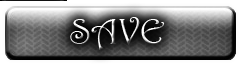
<style>
.page{position:relative;width:242px;height:67px}
.page>*{position:absolute;margin:0}
.t1{font:36px "Harrington"}
</style>
<div class="page">
<p class="t1" style="left:70px;top:17px;width:95px;height:33px">SAVE</p>
</div>
